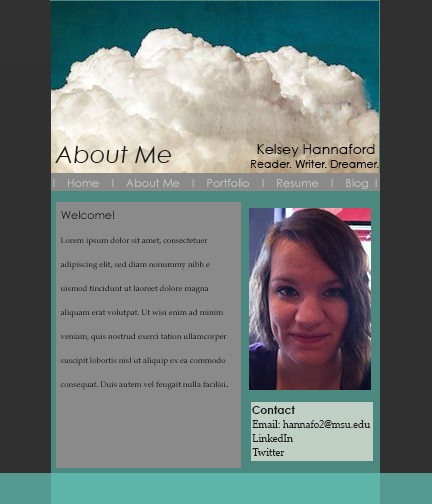
<style>
.page{position:relative;width:432px;height:504px;background:#8a8a8a}
.page>*{position:absolute;margin:0}
.t1{font:24px "CenturyGothic-Italic";color:#1d1b1d}
.t2{font:14px "CenturyGothic";color:#030303}
.t3{font:11px "CenturyGothic";color:#030303}
.t4{font:11px "CenturyGothic";color:#bfcfc4}
.t5{font:11px "CenturyGothic";color:#000000}
.t6{font:8px/24px "PalatinoLinotype-Roman"}
.t7{font:12px/24px "PalatinoLinotype-Roman"}
.t8{font:11px "CenturyGothic-Bold";color:#1d1b1d}
.t9{font:10px "Palatino-Roman";color:#1d1b1d}
</style>
<div class="page">
<p class="t1" style="left:55px;top:146px;width:116px;height:17px">About Me</p>
<p class="t2" style="left:257px;top:144px;width:118px;height:13px">Kelsey Hannaford</p>
<p class="t3" style="left:251px;top:160px;width:128px;height:8px">Reader. Writer. Dreamer.</p>
<p class="t4" style="left:53px;top:178px;width:324px;height:12px">I    Home    I    About Me    I    Portfolio    I    Resume    I    Blog  I</p>
<p class="t5" style="left:61px;top:210px;width:54px;height:9px">Welcome!</p>
<p class="t6" style="left:60px;top:237px;width:168px;height:153px">Lorem ipsum dolor sit amet, consectetuer <br>adipiscing elit, sed diam nonummy nibh e<br>uismod tincidunt ut laoreet dolore magna <br>aliquam erat volutpat. Ut wisi enim ad minim <br>veniam, quis nostrud exerci tation ullamcorper <br>suscipit lobortis nisl ut aliquip ex ea commodo <br>consequat. Duis autem vel feugait nulla facilisi<span class="t7">.</span></p>
<p class="t8" style="left:252px;top:406px;width:43px;height:8px">Contact</p>
<p class="t9" style="left:252px;top:420px;width:119px;height:8px">Email: hannafo2@msu.edu</p>
<p class="t9" style="left:252px;top:434px;width:41px;height:8px">LinkedIn</p>
<p class="t9" style="left:252px;top:448px;width:33px;height:8px">Twitter</p>
</div>
